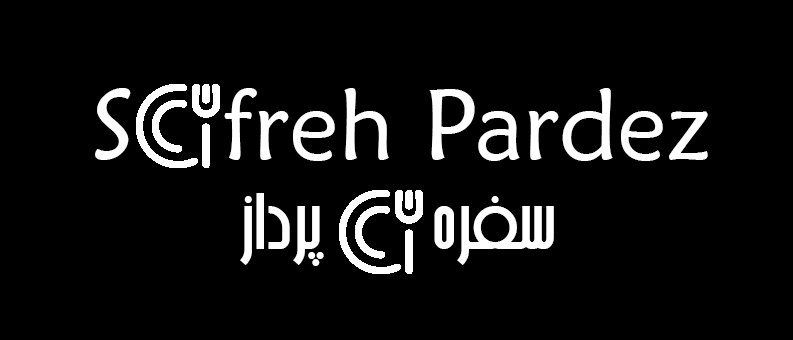
<style>
.page{position:relative;width:793px;height:340px;background:#000000}
.page>*{position:absolute;margin:0}
.t1{font:100px "MaiandraGD-Regular";color:#ffffff}
.t2{font:100px "BArshia";color:#ffffff}
</style>
<div class="page">
<p class="t1" style="left:95px;top:88px;width:613px;height:73px">S   freh Pardez</p>
<p class="t2" style="left:240px;top:193px;width:314px;height:73px">سفره          پرداز</p>
</div>
